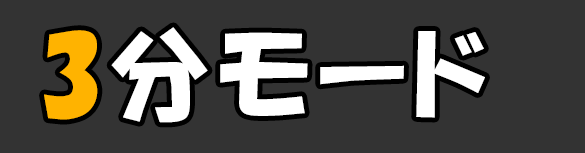
<style>
.page{position:relative;width:585px;height:153px;background:#333333}
.page>*{position:absolute;margin:0}
.t1{font:100px "HGPSoeiKakupoptai";letter-spacing:0.075em;color:#ffffff}
.t2{font:100px "HGPSoeiKakupoptai";letter-spacing:0.075em;color:#ffb300}
</style>
<div class="page">
<p class="t1" style="left:44px;top:27px;width:441px;height:96px"><span class="t2">3</span>分モード</p>
</div>
